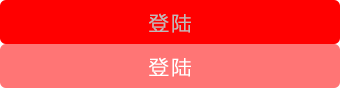
<style>
.page{position:relative;width:340px;height:88px;background:#ff7575}
.page>*{position:absolute;margin:0}
.t1{font:20px "FZLTXHK--GBK1-0";letter-spacing:0.1em;color:#bbbbbb;font-weight:bold}
.t2{font:20px "FZLTXHK--GBK1-0";letter-spacing:0.1em;color:#ffffff;font-weight:bold}
</style>
<div class="page">
<p class="t1" style="left:149px;top:13px;width:42px;height:20px">登陆</p>
<p class="t2" style="left:149px;top:57px;width:42px;height:20px">登陆</p>
</div>
